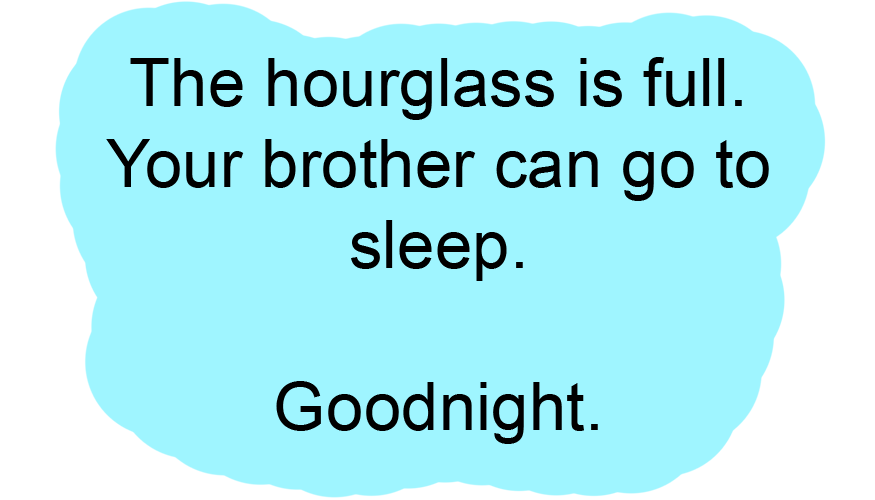
<style>
.page{position:relative;width:875px;height:500px;background:#9ff5ff}
.page>*{position:absolute;margin:0}
.t1{font:67.5px "ArialMT";color:#000000}
</style>
<div class="page">
<p class="t1" style="left:106px;top:57px;width:663px;height:387px;text-align:center">The hourglass is full.<br>Your brother can go to sleep.<br><br>Goodnight.</p>
</div>
